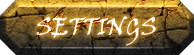
<style>
.page{position:relative;width:194px;height:55px}
.page>*{position:absolute;margin:0}
.t1{font:24px "VinerHandITC";color:#fefefe}
</style>
<div class="page">
<p class="t1" style="left:36px;top:16px;width:120px;height:30px">SETTINGS</p>
</div>
